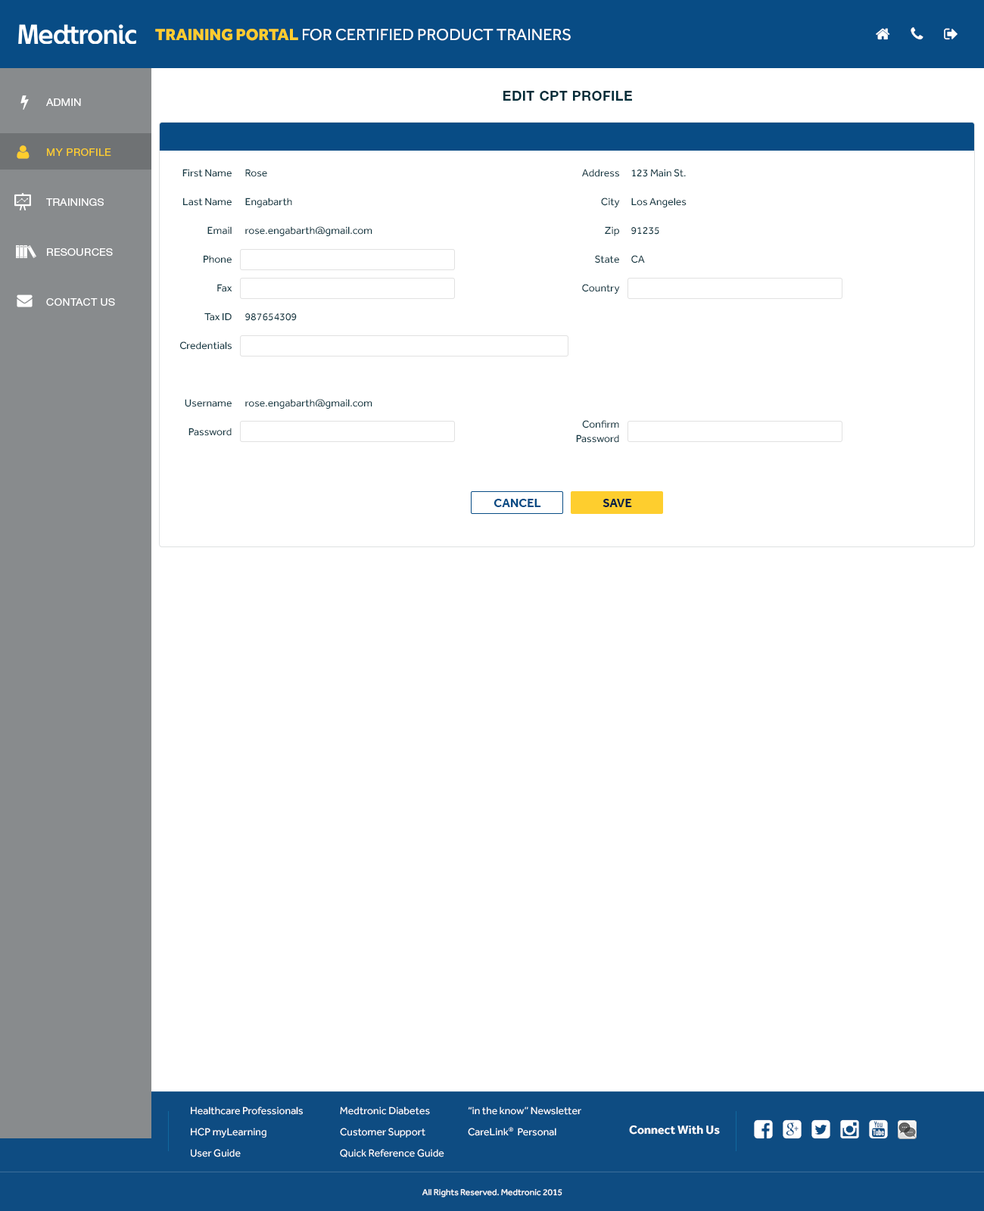
<style>
.page{position:relative;width:984px;height:1211px;background:#ffffff}
.page>*{position:absolute;margin:0}
.t1{font:16.7px "Effra-Regular";color:#ffffff;text-transform:uppercase}
.t2{font:16.7px "Effra-Heavy";color:#fecd2e;text-transform:uppercase}
.t3{font:10.6px/50px "HelveticaNeueLTStd-Roman";letter-spacing:0.025em;color:#ffffff;text-transform:uppercase}
.t4{font:10.6px/50px "HelveticaNeueLTStd-Roman";letter-spacing:0.025em;color:#fecd2e;text-transform:uppercase}
.t5{font:13.6px "HelveticaNeueLTStd-Bd";letter-spacing:0.025em;color:#032e3a;text-transform:uppercase}
.t6{font:10.6px/14.4px "Effra-Regular";color:#133944}
.t7{font:12.1px "Effra-Bold";color:#084c85;text-transform:uppercase}
.t8{font:12.1px "Effra-Bold";color:#011f45;text-transform:uppercase}
.t9{font:10.6px/21.2px "Effra-Regular";color:#ffffff}
.t10{font:12.1px "Effra-Bold";color:#ffffff}
.t11{font:8.9px "Effra-Regular";color:#ffffff}
</style>
<div class="page">
<p class="t1" style="left:155px;top:29px;width:416px;height:12px"><span class="t2">Training Portal</span> for certified product trainers</p>
<p class="t3" style="left:46px;top:98px;width:69px;height:208px">Admin<br><span class="t4">My Profile<br></span>Trainings<br>resources<br>contact us</p>
<p class="t5" style="left:504px;top:91px;width:128px;height:10px">Edit CPT Profile</p>
<p class="t6" style="left:180px;top:169px;width:52px;height:267px;text-align:right">First Name<br><br>Last Name<br><br>Email<br><br>Phone<br><br>Fax<br><br>Tax ID<br><br>Credentials<br><br><br><br>Username<br><br>Password</p>
<p class="t6" style="left:245px;top:169px;width:128px;height:240px">Rose<br><br>Engabarth<br><br>rose.engabarth@gmail.com<br><br><br><br><br><br>987654309<br><br><br><br><br><br>rose.engabarth@gmail.com</p>
<p class="t6" style="left:582px;top:169px;width:38px;height:125px;text-align:right">Address<br><br>City<br><br>Zip<br><br>State<br><br>Country</p>
<p class="t6" style="left:631px;top:169px;width:56px;height:94px">123 Main St.<br><br>Los Angeles<br><br>91235<br><br>CA</p>
<p class="t6" style="left:576px;top:420px;width:43px;height:23px;text-align:right">Confirm<br>Password</p>
<p class="t7" style="left:494px;top:499px;width:47px;height:8px">Cancel</p>
<p class="t8" style="left:603px;top:499px;width:29px;height:8px">save</p>
<p class="t9" style="left:191px;top:1107px;width:112px;height:51px">Healthcare Professionals<br>HCP myLearning<br>User Guide</p>
<p class="t9" style="left:340px;top:1107px;width:104px;height:51px;text-align:right">Medtronic Diabetes<br>Customer Support<br>Quick Reference Guide</p>
<p class="t9" style="left:468px;top:1107px;width:113px;height:29px">“in the know” Newsletter<br>CareLink®  Personal</p>
<p class="t10" style="left:629px;top:1126px;width:91px;height:9px">Connect With Us</p>
<p class="t11" style="left:422px;top:1189px;width:141px;height:9px">2015 All Rights Reserved. Medtronic</p>
</div>
